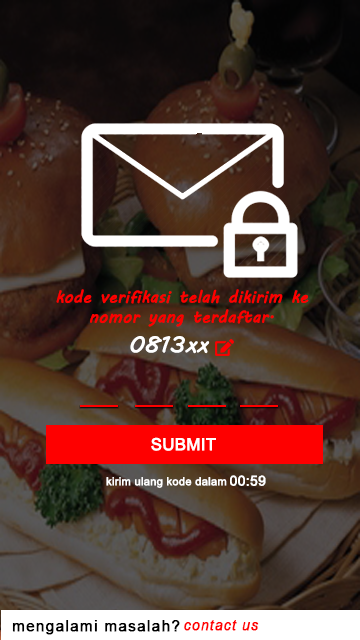
<style>
.page{position:relative;width:360px;height:640px}
.page>*{position:absolute;margin:0}
.t1{font:16.7px "MVBoli";color:#fe0000;font-weight:bold}
.t2{font:22.2px "MVBoli";color:#ffffff;font-weight:bold}
.t3{font:16.7px "ArialMT";color:#ffffff;font-weight:bold}
.t4{font:11.1px "ArialMT";color:#ffffff;font-weight:bold}
.t5{font:13.9px "ArialMT";color:#ffffff;font-weight:bold}
.t6{font:15.3px "ArialMT";letter-spacing:0.06em;color:#000000;font-weight:bold}
.t7{font:13.9px "Arial-ItalicMT";letter-spacing:0.06em;color:#ff0000;font-weight:bold}
</style>
<div class="page">
<p class="t1" style="left:56px;top:289px;width:253px;height:38px;text-align:center">kode verifikasi telah dikirim ke<br>nomor yang terdaftar.</p>
<p class="t2" style="left:130px;top:336px;width:80px;height:18px">0813xx</p>
<p class="t3" style="left:151px;top:437px;width:65px;height:14px">SUBMIT</p>
<p class="t4" style="left:106px;top:477px;width:121px;height:11px">kirim ulang kode dalam</p>
<p class="t5" style="left:230px;top:475px;width:36px;height:11px">00:59</p>
<p class="t6" style="left:12px;top:620px;width:168px;height:15px">mengalami masalah?</p>
<p class="t7" style="left:184px;top:620px;width:75px;height:11px">contact us</p>
</div>
